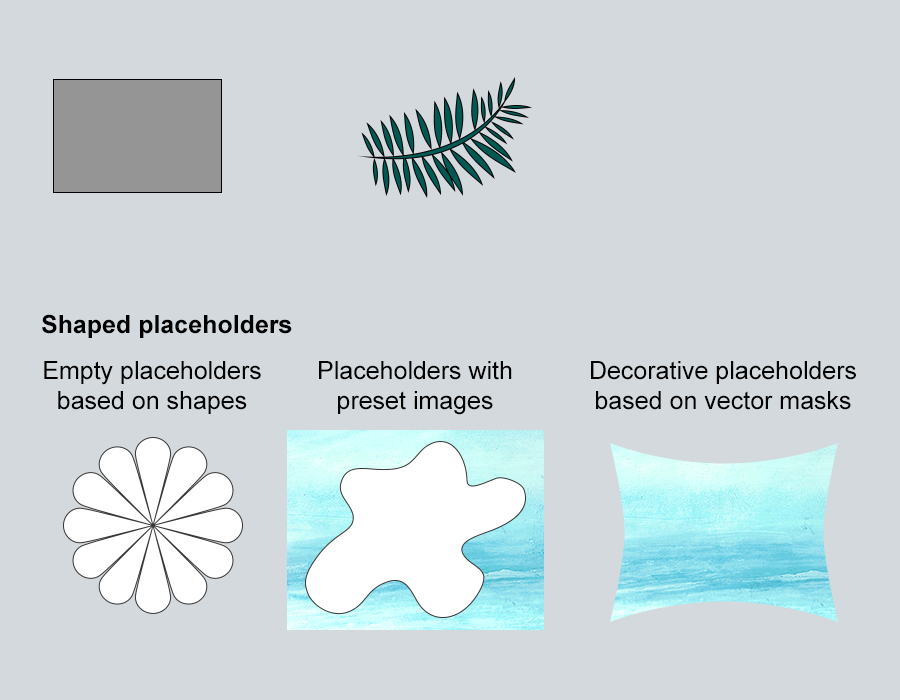
<style>
.page{position:relative;width:900px;height:700px;background:#d4d9dd}
.page>*{position:absolute;margin:0}
.t1{font:25px "Arial-BoldMT";color:#000000}
.t2{font:25px "ArialMT";color:#000000}
</style>
<div class="page">
<p class="t1" style="left:42px;top:314px;width:250px;height:24px">Shaped placeholders</p>
<p class="t2" style="left:44px;top:361px;width:217px;height:53px;text-align:center">Empty placeholders<br>based on shapes</p>
<p class="t2" style="left:319px;top:361px;width:193px;height:54px;text-align:center">Placeholders with<br>preset images</p>
<p class="t2" style="left:591px;top:361px;width:265px;height:49px;text-align:center">Decorative placeholders<br>based on vector masks</p>
</div>
